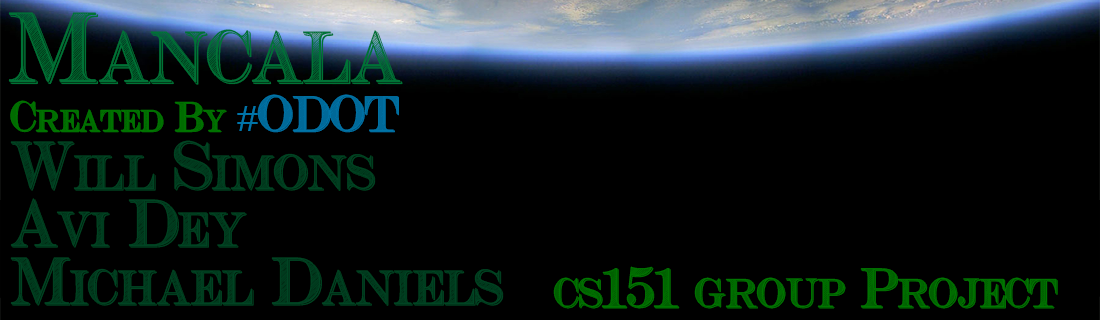
<style>
.page{position:relative;width:1100px;height:320px;background:#000000}
.page>*{position:absolute;margin:0}
.t1{font:72px "CashCurrency";color:#007236}
.t2{font:48px "CashCurrency";color:#004423}
.t3{font:30px "CashCurrency";color:#007700}
.t4{font:36px "CenturySchoolbook";color:#0074a8}
.t5{font:36px "CashCurrency";color:#0074a8}
.t6{font:40px "CashCurrency";color:#007700}
</style>
<div class="page">
<p class="t1" style="left:8px;top:12px;width:395px;height:73px">Mancala</p>
<p class="t2" style="left:10px;top:94px;width:494px;height:212px"><span class="t3">Created By </span><span class="t4">#</span><span class="t5">ODOT<br></span>Will Simons<br>Avi Dey<br>Michael Daniels</p>
<p class="t6" style="left:553px;top:266px;width:505px;height:43px">cs151 group Project</p>
</div>
